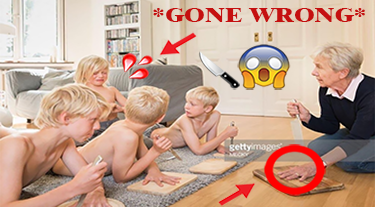
<style>
.page{position:relative;width:375px;height:207px}
.page>*{position:absolute;margin:0}
.t1{font:21.2px "Dutch801BT-ExtraBold";color:#c51010;scale:1.21 1}
</style>
<div class="page">
<p class="t1" style="left:153px;top:8px;width:212px;height:14px">*GONE WRONG*</p>
</div>
